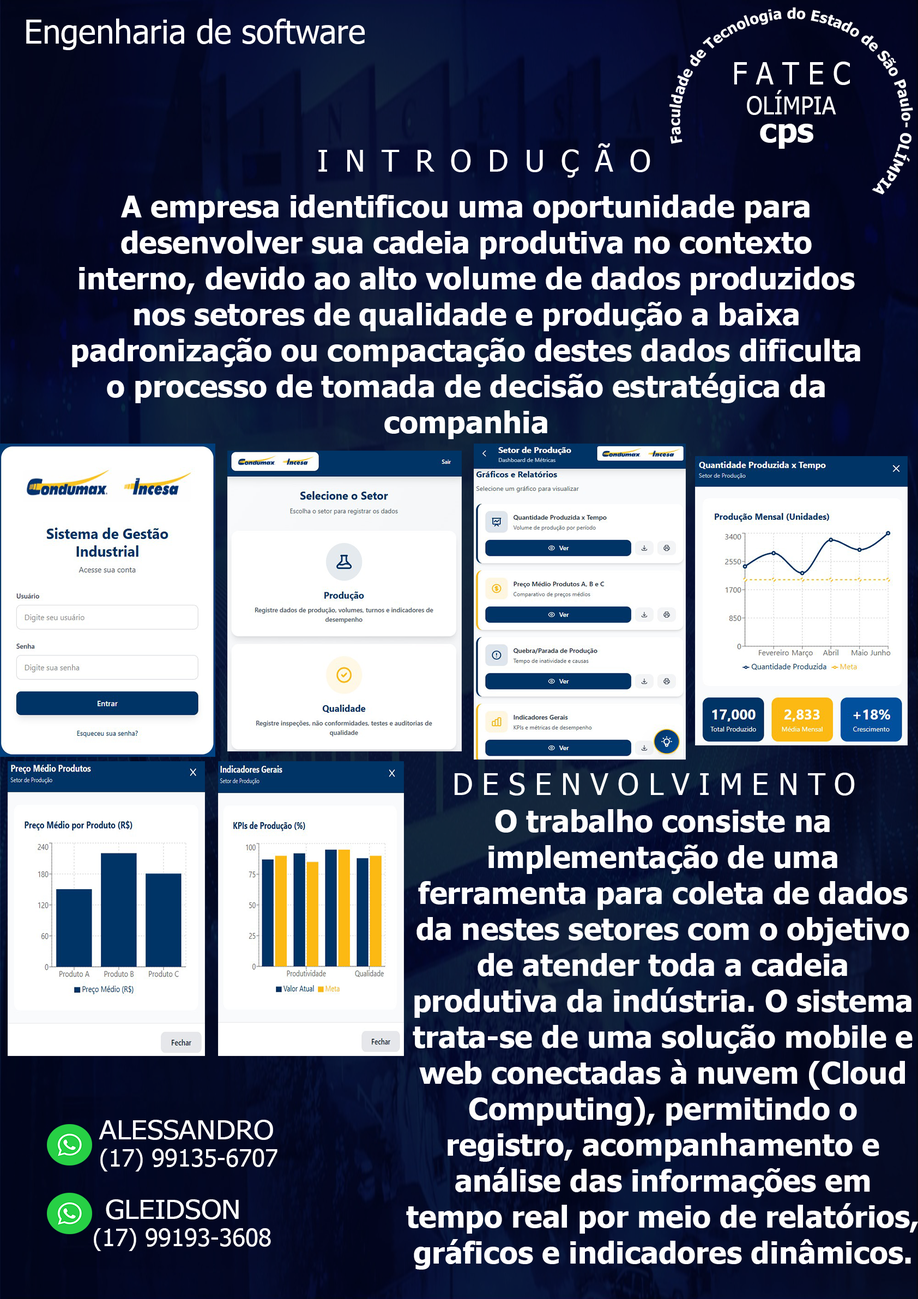
<style>
.page{position:relative;width:918px;height:1299px}
.page>*{position:absolute;margin:0}
.t1{font:14.5px "Tahoma-Bold";color:#ffffff}
.t2{font:32.7px "Tahoma";color:#ffffff}
.t3{font:31.1px "Tahoma";color:#ffffff;scale:0.92 1}
.t4{font:25.1px "Tahoma";color:#ffffff;scale:0.92 1}
.t5{font:32.7px "Tahoma-Bold";color:#ffffff}
.t6{font:30px "Tahoma";color:#ffffff}
.t7{font:30px "Tahoma-Bold";color:#ffffff}
.t8{font:30px "Tahoma-Bold";color:#fefefe}
.t9{font:26.2px "Tahoma";color:#fdfdfd;scale:1.11 1}
.t10{font:24px "Tahoma";color:#ffffff}
.t11{font:26.2px "Tahoma";color:#fefefe;scale:1.1 1}
</style>
<div class="page">
<p class="t1" style="left:669px;top:7px;width:244px;height:188px;text-align:right">Faculdade de Tecnologia do Estado de São Paulo- OLÍMPIA</p>
<p class="t2" style="left:26px;top:19px;width:339px;height:31px">Engenharia de software</p>
<p class="t3" style="left:734px;top:62px;width:116px;height:53px;text-align:center">F A T E C<br><span class="t4">OLÍMPIA</span></p>
<p class="t5" style="left:760px;top:124px;width:53px;height:25px">cps</p>
<p class="t6" style="left:318px;top:143px;width:332px;height:35px">INTRODUÇÃO</p>
<p class="t7" style="left:72px;top:195px;width:788px;height:244px;text-align:center">A empresa identificou uma oportunidade para desenvolver sua cadeia produtiva no contexto interno, devido ao alto volume de dados produzidos nos setores de qualidade e produção a baixa padronização ou compactação destes dados dificulta o processo de tomada de decisão estratégica da companhia</p>
<p class="t6" style="left:455px;top:773px;width:400px;height:23px">DESENVOLVIMENTO</p>
<p class="t8" style="left:406px;top:809px;width:512px;height:461px;text-align:center">O trabalho consiste na implementação de uma ferramenta para coleta de dados da nestes setores com o objetivo de atender toda a cadeia produtiva da indústria. O sistema trata-se de uma solução mobile e web conectadas à nuvem (Cloud Computing), permitindo o registro, acompanhamento e análise das informações em tempo real por meio de relatórios, gráficos e indicadores dinâmicos.</p>
<p class="t9" style="left:99px;top:1120px;width:174px;height:20px">ALESSANDRO</p>
<p class="t10" style="left:100px;top:1149px;width:177px;height:23px">(17) 99135-6707</p>
<p class="t11" style="left:106px;top:1200px;width:133px;height:20px">GLEIDSON</p>
<p class="t10" style="left:94px;top:1228px;width:177px;height:23px">(17) 99193-3608</p>
</div>
